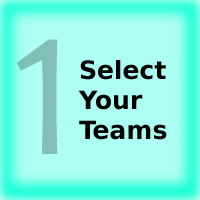
<style>
.page{position:relative;width:200px;height:200px;background:#adfff1}
.page>*{position:absolute;margin:0}
.t1{font:180px "Candara";color:#82bfb5}
.t2{font:25px "DejaVuSans-Bold";color:#000000}
</style>
<div class="page">
<p class="t1" style="left:17px;top:39px;width:41px;height:115px">1</p>
<p class="t2" style="left:78px;top:60px;width:89px;height:80px">Select<br>Your<br>Teams</p>
</div>
